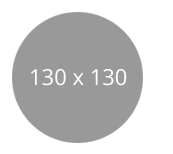
<style>
.page{position:relative;width:173px;height:154px;background:#ffffff}
.page>*{position:absolute;margin:0}
.t1{font:22px "OpenSans";color:#ffffff}
</style>
<div class="page">
<p class="t1" style="left:31px;top:69px;width:96px;height:17px">130 x 130</p>
</div>
